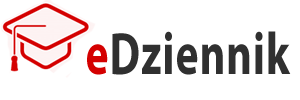
<style>
.page{position:relative;width:300px;height:100px;background:#ffffff}
.page>*{position:absolute;margin:0}
.t1{font:60px "MyriadPro-Bold";letter-spacing:0.025em;color:#303030;scale:0.73 1}
.t2{font:60px "MyriadPro-Bold";letter-spacing:0.025em;color:#d40000;scale:0.73 1}
</style>
<div class="page">
<p class="t1" style="left:87px;top:31px;width:204px;height:44px"><span class="t2">e</span>Dziennik</p>
</div>
